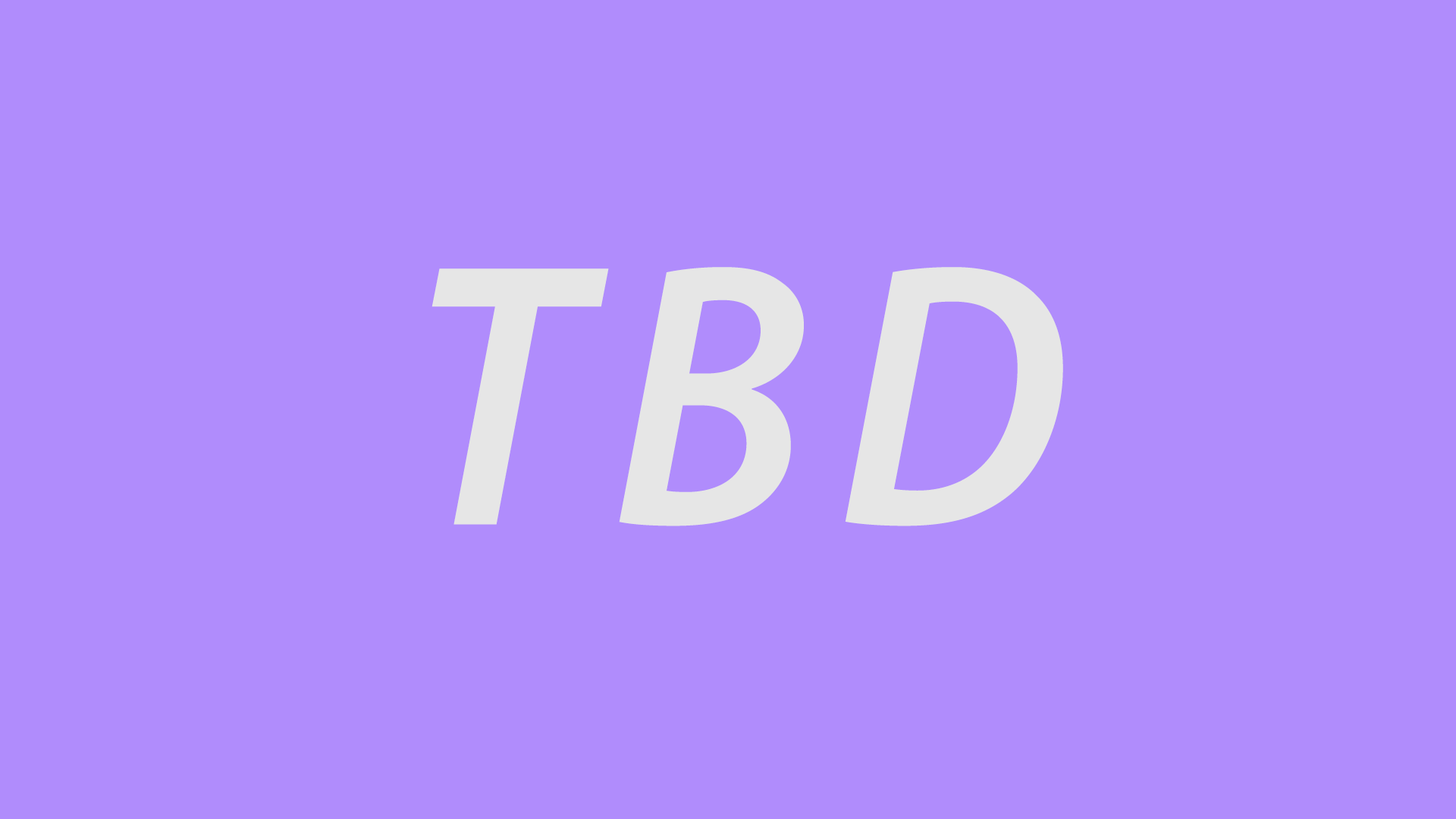
<style>
.page{position:relative;width:1456px;height:819px;background:#b08cfc}
.page>*{position:absolute;margin:0}
.t1{font:379.2px "MyriadConceptItalic-SemiboldSemiCondensedItalic";letter-spacing:0.08em;color:#e6e6e6}
</style>
<div class="page">
<p class="t1" style="left:431px;top:267px;width:632px;height:259px">TBD</p>
</div>
